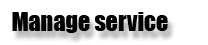
<style>
.page{position:relative;width:208px;height:45px;background:#ffffff}
.page>*{position:absolute;margin:0}
.t1{font:24px "Impact";color:#000000}
</style>
<div class="page">
<p class="t1" style="left:12px;top:12px;width:156px;height:21px">Manage service</p>
</div>
